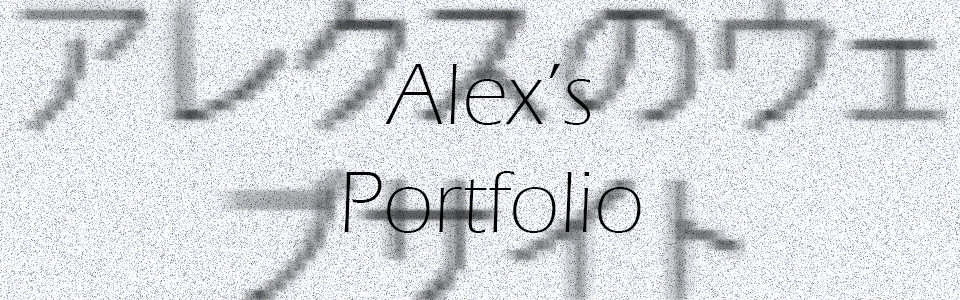
<style>
.page{position:relative;width:960px;height:300px}
.page>*{position:absolute;margin:0}
.t1{font:90px "ErasITC-Light";color:#000000}
</style>
<div class="page">
<p class="t1" style="left:344px;top:64px;width:297px;height:169px;text-align:center">Alex’s<br>Portfolio</p>
</div>
